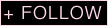
<style>
.page{position:relative;width:108px;height:26px;background:#000000}
.page>*{position:absolute;margin:0}
.t1{font:18px "Helvetica";letter-spacing:0.05em;color:#fbd7e7}
</style>
<div class="page">
<p class="t1" style="left:4px;top:5px;width:98px;height:15px">+ FOLLOW</p>
</div>
